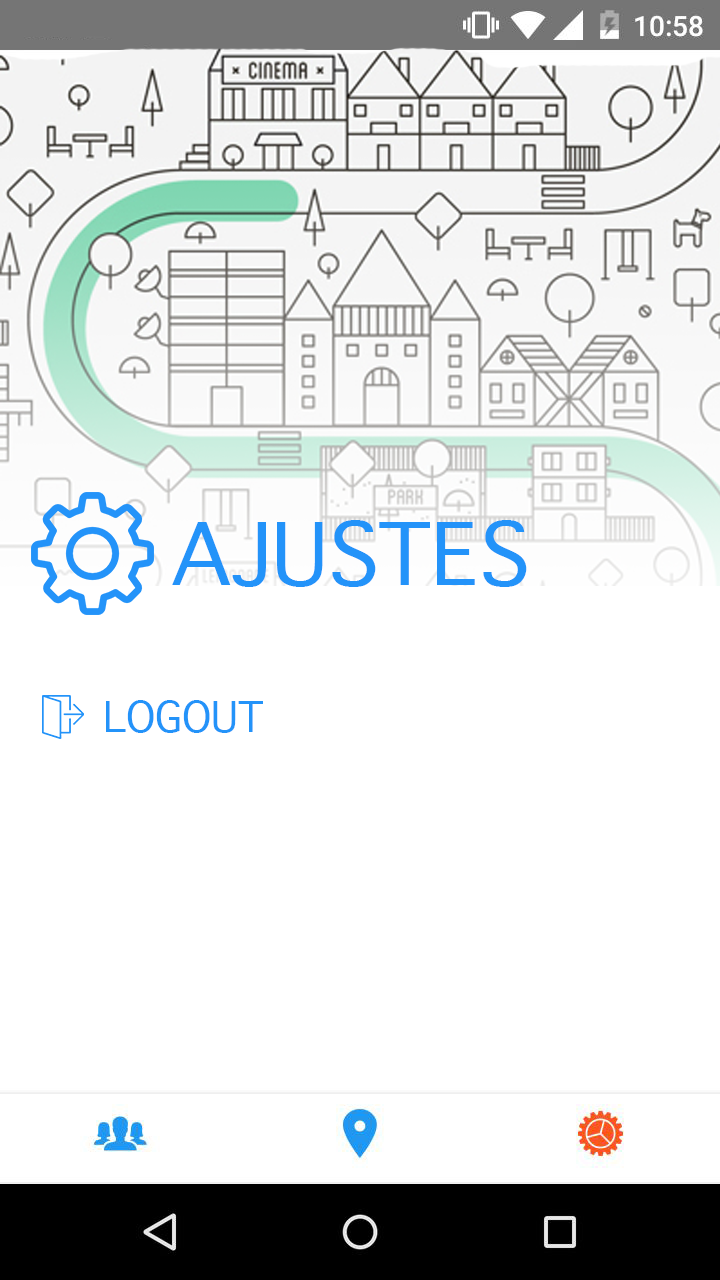
<style>
.page{position:relative;width:720px;height:1280px;background:#ffffff}
.page>*{position:absolute;margin:0}
.t1{font:83.2px "Geneva";color:#2393f9}
.t2{font:39.9px "Geneva";color:#2393f9}
</style>
<div class="page">
<p class="t1" style="left:172px;top:520px;width:355px;height:67px">AJUSTES</p>
<p class="t2" style="left:106px;top:700px;width:157px;height:33px">LOGOUT</p>
</div>
